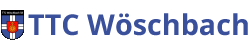
<style>
.page{position:relative;width:250px;height:50px;background:#ffffff}
.page>*{position:absolute;margin:0}
.t1{font:28.8px "OpenSans-Bold";color:#3a509b}
</style>
<div class="page">
<p class="t1" style="left:28px;top:13px;width:220px;height:23px">TTC Wöschbach</p>
</div>
